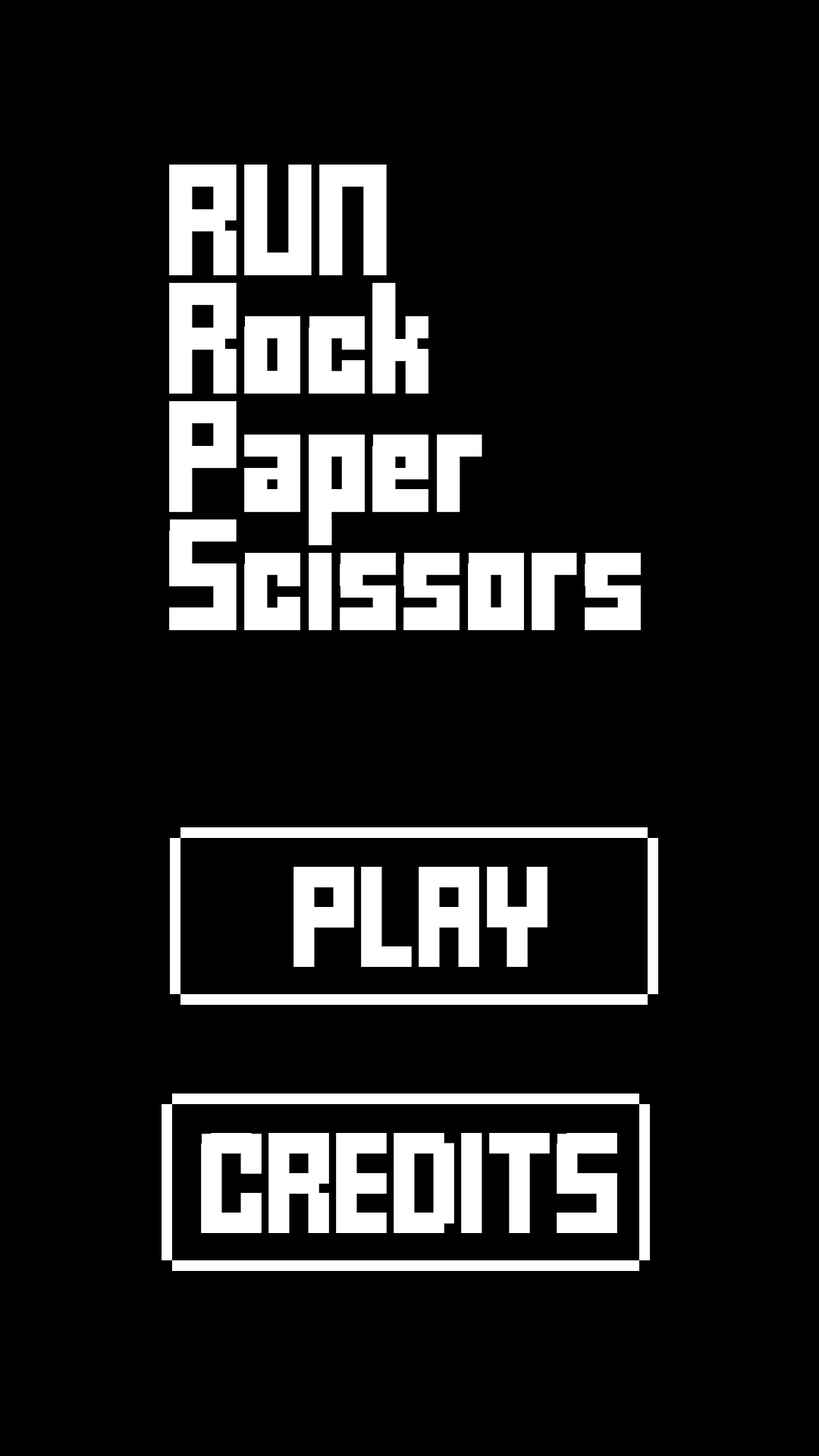
<style>
.page{position:relative;width:819px;height:1456px;background:#000000}
.page>*{position:absolute;margin:0}
.t1{font:151.7px/59.1px "FFFForward";letter-spacing:-0.025em;color:#ffffff}
.t2{font:136.5px "FFFForward";letter-spacing:-0.025em;color:#ffffff}
</style>
<div class="page">
<p class="t1" style="left:169px;top:165px;width:472px;height:465px">RUN<br><br>Rock<br><br>Paper<br><br>Scissors</p>
<p class="t2" style="left:293px;top:867px;width:255px;height:100px">PLAY</p>
<p class="t2" style="left:201px;top:1133px;width:416px;height:100px">CREDITS</p>
</div>
